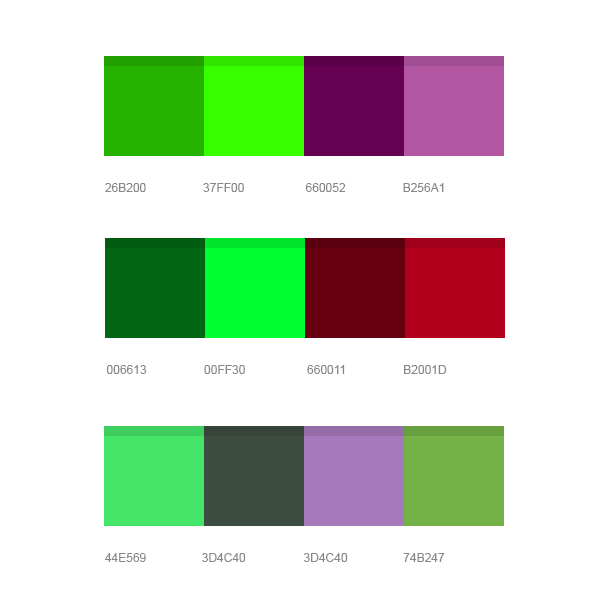
<style>
.page{position:relative;width:600px;height:600px;background:#ffffff}
.page>*{position:absolute;margin:0}
.t1{font:12px "ArialMT";color:#878787;text-transform:uppercase}
</style>
<div class="page">
<p class="t1" style="left:105px;top:183px;width:41px;height:9px">26b200</p>
<p class="t1" style="left:203px;top:183px;width:41px;height:9px">37FF00</p>
<p class="t1" style="left:305px;top:183px;width:41px;height:9px">660052</p>
<p class="t1" style="left:403px;top:183px;width:41px;height:9px">B256A1</p>
<p class="t1" style="left:106px;top:365px;width:41px;height:9px">006613</p>
<p class="t1" style="left:204px;top:365px;width:41px;height:9px">00ff30</p>
<p class="t1" style="left:307px;top:365px;width:38px;height:9px">660011</p>
<p class="t1" style="left:404px;top:365px;width:43px;height:9px">b2001d</p>
<p class="t1" style="left:105px;top:553px;width:41px;height:9px">44e569</p>
<p class="t1" style="left:202px;top:553px;width:44px;height:9px">3d4c40</p>
<p class="t1" style="left:303px;top:553px;width:45px;height:9px">3d4c40</p>
<p class="t1" style="left:403px;top:553px;width:42px;height:9px">74b247</p>
</div>
